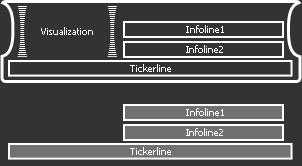
<style>
.page{position:relative;width:302px;height:166px;background:#333333}
.page>*{position:absolute;margin:0}
.t1{font:10px "Tahoma";color:#ffffff}
</style>
<div class="page">
<p class="t1" style="left:41px;top:27px;width:52px;height:8px">Visualization</p>
<p class="t1" style="left:186px;top:25px;width:38px;height:8px">Infoline1</p>
<p class="t1" style="left:186px;top:45px;width:37px;height:8px">Infoline2</p>
<p class="t1" style="left:130px;top:64px;width:41px;height:8px">Tickerline</p>
<p class="t1" style="left:186px;top:108px;width:38px;height:8px">Infoline1</p>
<p class="t1" style="left:186px;top:128px;width:37px;height:8px">Infoline2</p>
<p class="t1" style="left:130px;top:147px;width:41px;height:8px">Tickerline</p>
</div>
